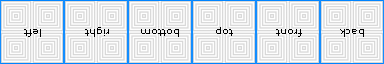
<style>
.page{position:relative;width:384px;height:64px;background:#fefefe}
.page>*{position:absolute;margin:0}
.t1{font:10px "Verdana";color:#000000}
</style>
<div class="page">
<p class="t1" style="left:24px;top:29px;width:17px;height:8px;rotate:180deg">left</p>
<p class="t1" style="left:85px;top:27px;width:24px;height:10px;rotate:180deg">right</p>
<p class="t1" style="left:141px;top:29px;width:38px;height:8px;rotate:180deg">bottom</p>
<p class="t1" style="left:216px;top:27px;width:17px;height:9px;rotate:180deg">top</p>
<p class="t1" style="left:276px;top:29px;width:26px;height:8px;rotate:180deg">front</p>
<p class="t1" style="left:340px;top:29px;width:24px;height:8px;rotate:180deg">back</p>
</div>
